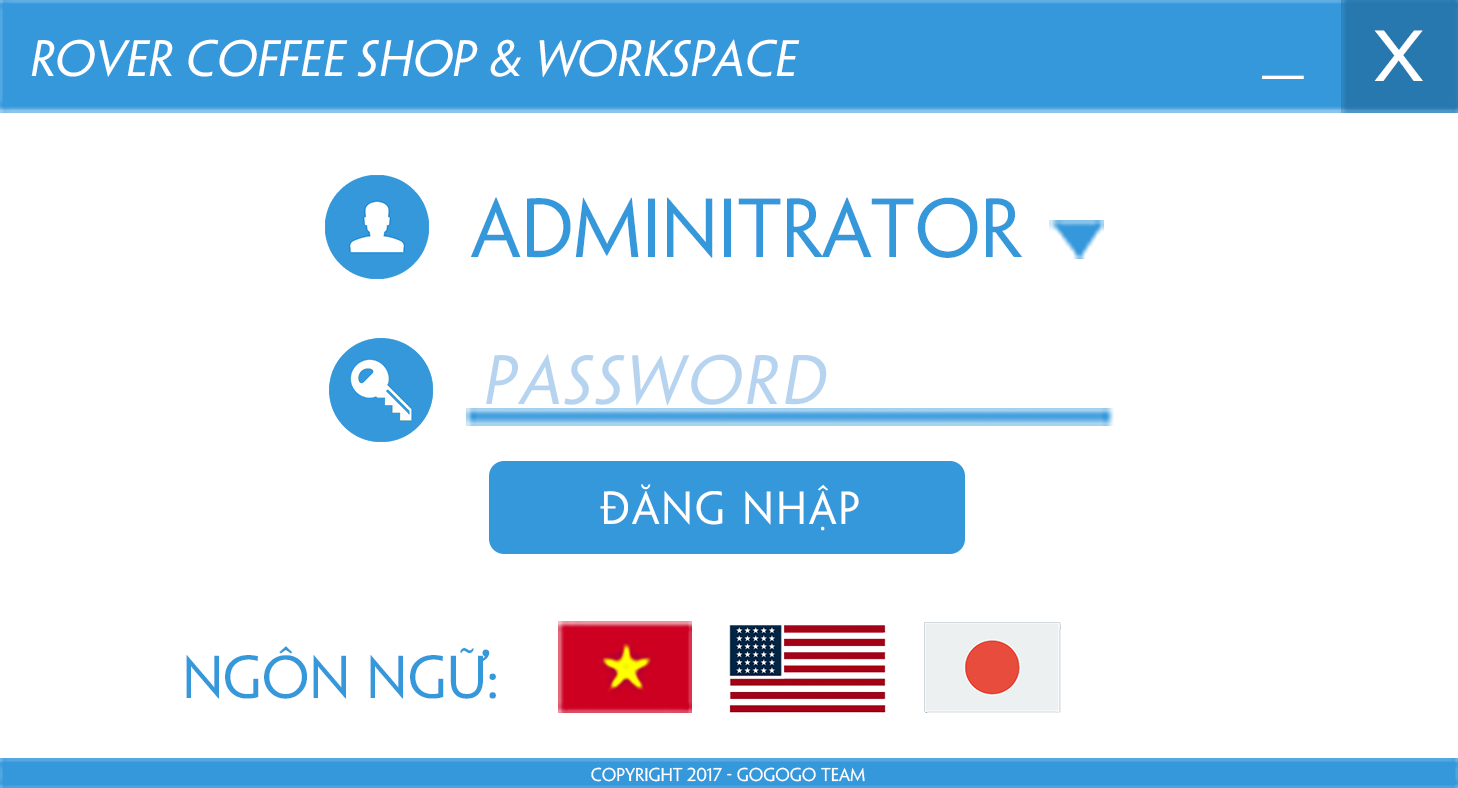
<style>
.page{position:relative;width:1458px;height:788px;background:#ffffff}
.page>*{position:absolute;margin:0}
.t1{font:64.7px "UTM-Penumbra";color:#ffffff;scale:1.29 1}
.t2{font:45.9px "UTM-Penumbra";color:#ffffff;font-style:italic}
.t3{font:75.1px "UTM-Penumbra";color:#3598db}
.t4{font:62.6px "UTM-Penumbra";letter-spacing:0.05em;color:#b6d4ef;font-style:italic}
.t5{font:41.7px "UTM-Penumbra";letter-spacing:0.05em;color:#ffffff}
.t6{font:54.2px "UTM-Penumbra";color:#3598db}
.t7{font:16.7px "UTM-Penumbra";color:#ffffff}
</style>
<div class="page">
<p class="t1" style="left:1374px;top:30px;width:49px;height:51px">x</p>
<p class="t2" style="left:31px;top:39px;width:769px;height:38px">Rover coffee shop &amp; workspace</p>
<p class="t1" style="left:1262px;top:75px;width:42px;height:4px">_</p>
<p class="t3" style="left:470px;top:197px;width:553px;height:61px">Adminitrator</p>
<p class="t4" style="left:486px;top:354px;width:341px;height:52px">Password</p>
<p class="t5" style="left:600px;top:484px;width:259px;height:47px">Đăng nhập</p>
<p class="t6" style="left:186px;top:646px;width:310px;height:53px">Ngôn Ngữ:</p>
<p class="t7" style="left:591px;top:767px;width:274px;height:15px">Copyright 2017 - gogogo team</p>
</div>
